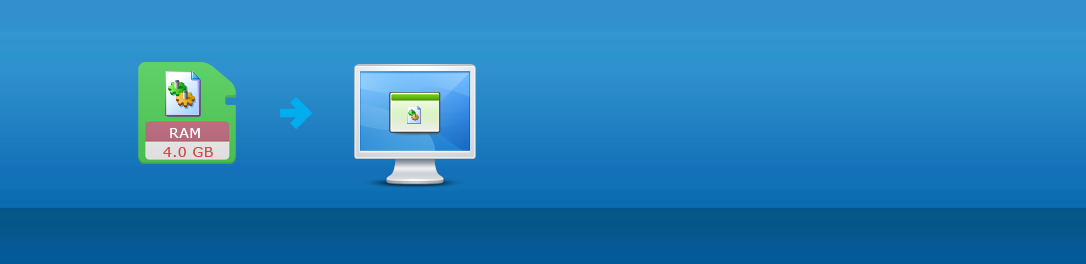
<style>
.page{position:relative;width:1086px;height:264px}
.page>*{position:absolute;margin:0}
.t1{font:14px "Verdana";letter-spacing:0.03em;color:#ffffff}
.t2{font:14px "Verdana";letter-spacing:0.03em;color:#d34848}
</style>
<div class="page">
<p class="t1" style="left:170px;top:128px;width:30px;height:10px">RAM</p>
<p class="t2" style="left:163px;top:147px;width:50px;height:10px">4.0 GB</p>
</div>
